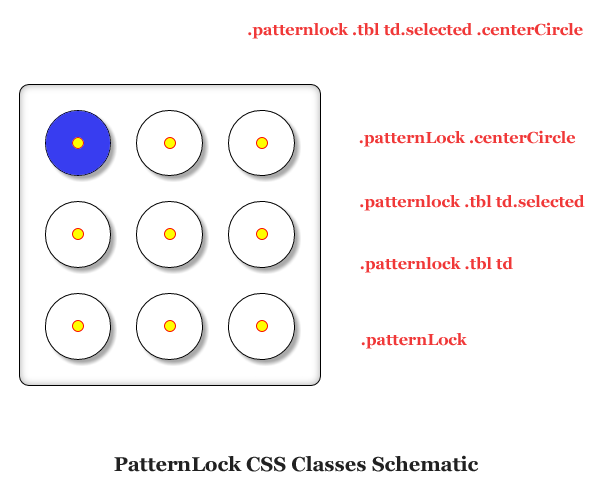
<style>
.page{position:relative;width:600px;height:500px;background:#ffffff}
.page>*{position:absolute;margin:0}
.t1{font:16px "Georgia-Bold";color:#f03838}
.t2{font:20px "Georgia-Bold";color:#212121}
</style>
<div class="page">
<p class="t1" style="left:248px;top:22px;width:335px;height:17px">.patternlock .tbl td.selected .centerCircle</p>
<p class="t1" style="left:359px;top:130px;width:217px;height:17px">.patternLock .centerCircle</p>
<p class="t1" style="left:360px;top:195px;width:225px;height:16px">.patternlock .tbl td.selected</p>
<p class="t1" style="left:360px;top:257px;width:153px;height:16px">.patternlock .tbl td</p>
<p class="t1" style="left:361px;top:333px;width:106px;height:16px">.patternLock</p>
<p class="t2" style="left:114px;top:455px;width:365px;height:17px">PatternLock CSS Classes Schematic</p>
</div>
